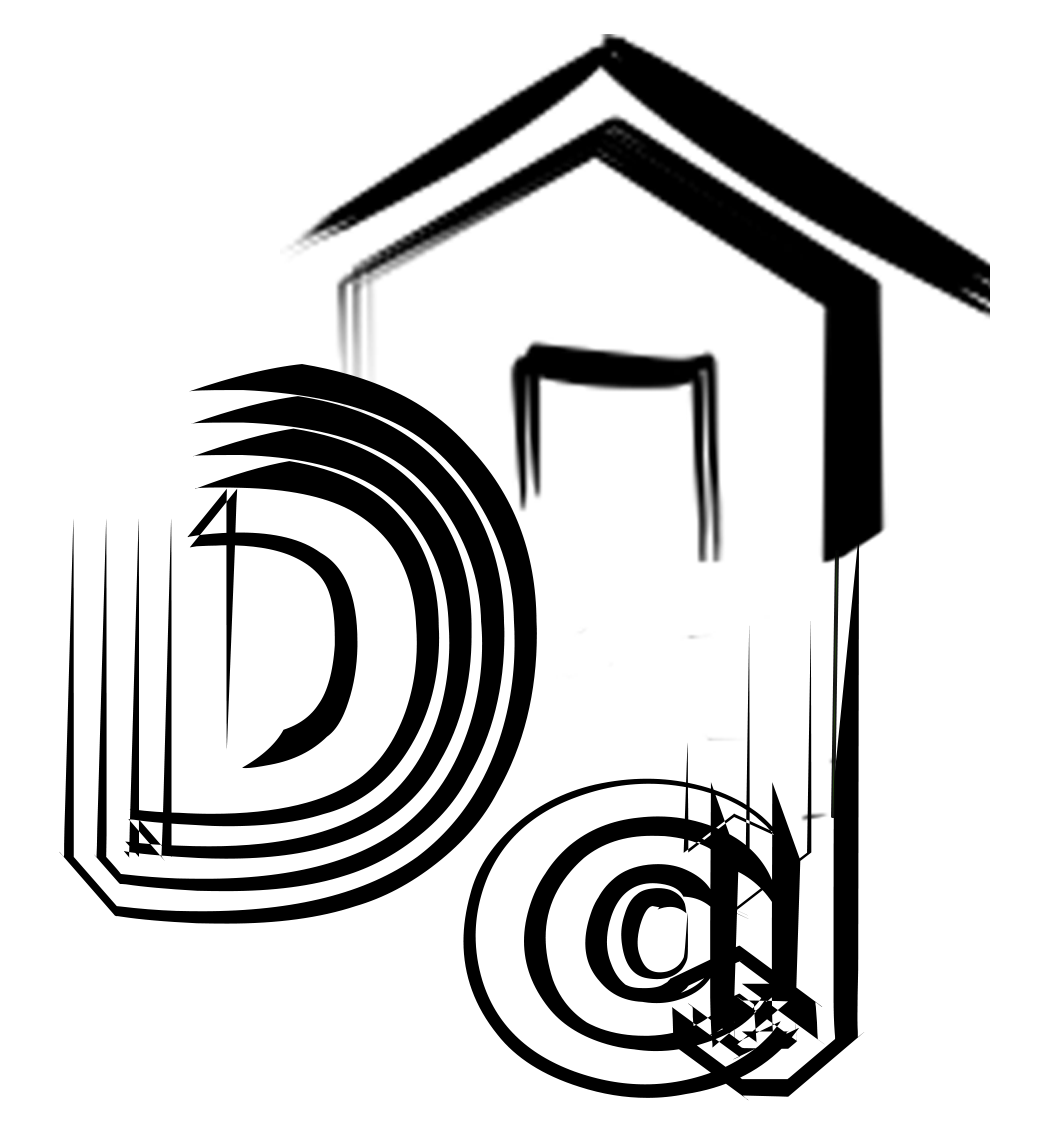
<style>
.page{position:relative;width:1050px;height:1134px;background:#ffffff}
.page>*{position:absolute;margin:0}
.t1{font:700px "TH3-MACHINE";letter-spacing:0.005em;color:#000000}
.t2{font:599px "TH3-MACHINE";letter-spacing:0.005em;color:#000000;scale:1.29 1}
</style>
<div class="page">
<p class="t1" style="left:59px;top:364px;width:478px;height:560px">D</p>
<p class="t2" style="left:463px;top:532px;width:402px;height:569px">d</p>
</div>
